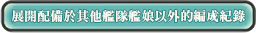
<style>
.page{position:relative;width:256px;height:33px}
.page>*{position:absolute;margin:0}
.t1{font:13px "RyuminPr6N-ExBold";color:#fff8f3}
</style>
<div class="page">
<p class="t1" style="left:11px;top:9px;width:235px;height:14px">展開配備於其他艦隊艦娘以外的編成紀錄</p>
</div>
